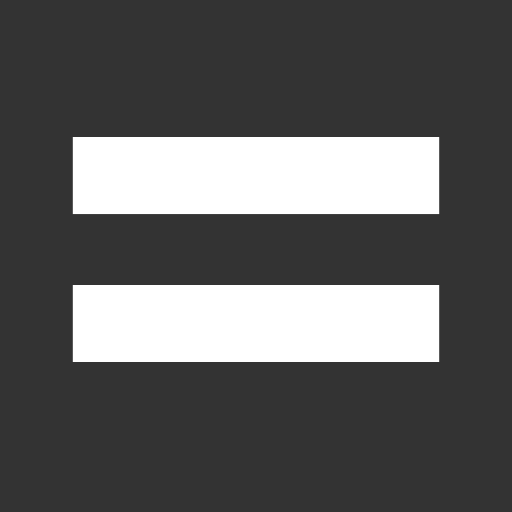
<style>
.page{position:relative;width:512px;height:512px;background:#333333}
.page>*{position:absolute;margin:0}
.t1{font:611px "Tahoma-Bold";color:#ffffff}
</style>
<div class="page">
<p class="t1" style="left:72px;top:137px;width:368px;height:225px">=</p>
</div>
